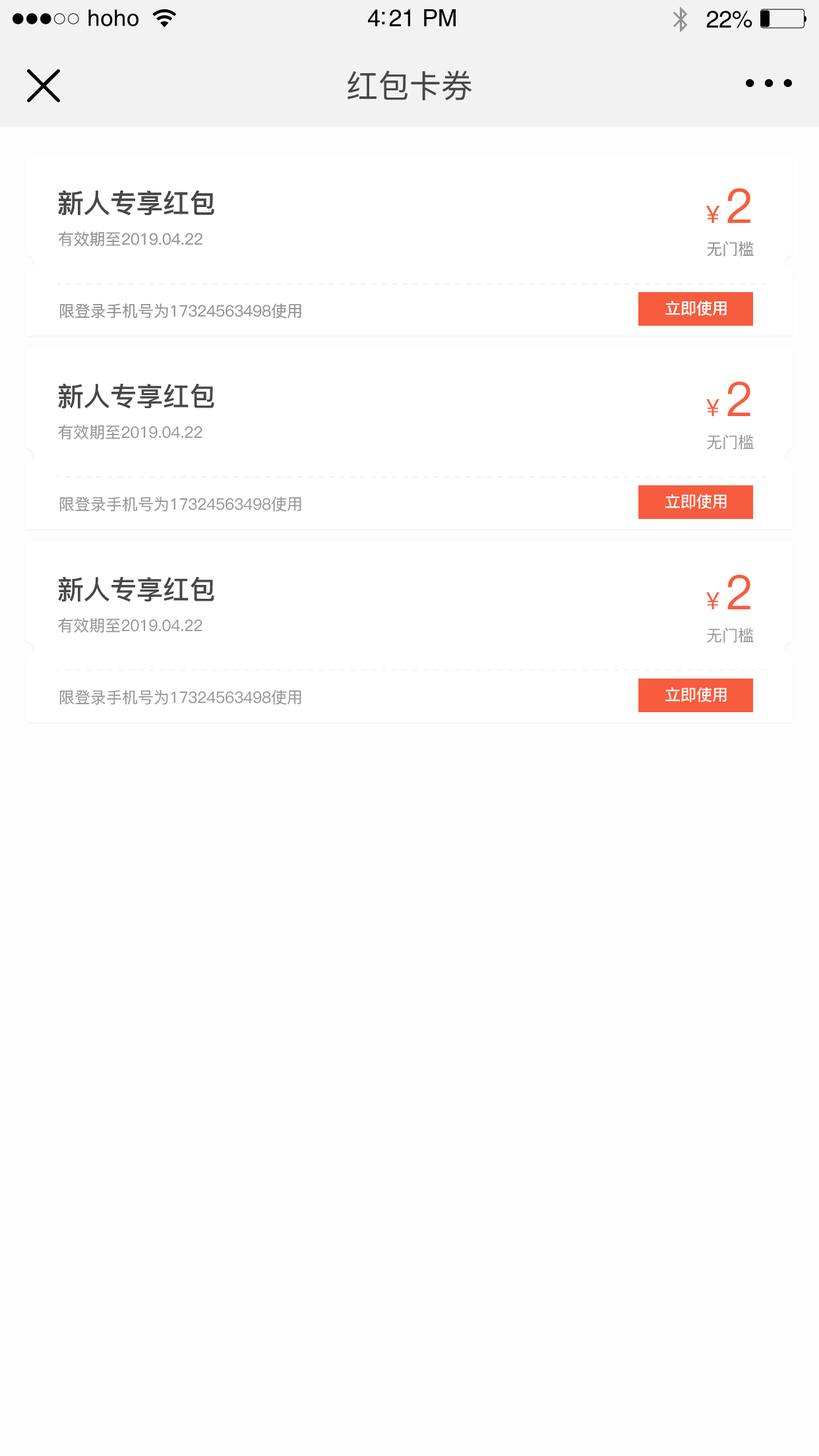
<style>
.page{position:relative;width:819px;height:1456px;background:#fefdfe}
.page>*{position:absolute;margin:0}
.t1{font:22.8px "Helvetica";letter-spacing:0.02em;color:#000000}
.t2{font:23.8px "Helvetica";letter-spacing:-0.02em;color:#000000}
.t3{font:31.7px "PingFang-SC-Medium";color:#474747}
.t4{font:26.4px "PingFang-SC-Bold";color:#474747}
.t5{font:23.7px "PingFang-SC-Medium";color:#f75c3e}
.t6{font:47.5px "PingFang-SC-Medium";color:#f75c3e}
.t7{font:15.8px "PingFang-SC-Medium";color:#959595}
.t8{font:15.8px "PingFang-SC-Bold";color:#fefdfe}
</style>
<div class="page">
<p class="t1" style="left:88px;top:9px;width:50px;height:17px">hoho</p>
<p class="t2" style="left:368px;top:9px;width:88px;height:17px">4:21 PM</p>
<p class="t2" style="left:706px;top:11px;width:46px;height:17px">22%</p>
<p class="t3" style="left:348px;top:71px;width:124px;height:29px">红包卡券</p>
<p class="t4" style="left:58px;top:190px;width:156px;height:26px">新人专享红包</p>
<p class="t5" style="left:706px;top:188px;width:44px;height:35px">￥<span class="t6">2</span></p>
<p class="t7" style="left:58px;top:231px;width:144px;height:16px">有效期至2019.04.22</p>
<p class="t7" style="left:707px;top:241px;width:47px;height:16px">无门槛</p>
<p class="t7" style="left:60px;top:303px;width:241px;height:15px">限登录手机号为17324563498使用</p>
<p class="t8" style="left:665px;top:301px;width:62px;height:15px">立即使用</p>
<p class="t4" style="left:58px;top:383px;width:156px;height:26px">新人专享红包</p>
<p class="t5" style="left:706px;top:381px;width:44px;height:35px">￥<span class="t6">2</span></p>
<p class="t7" style="left:58px;top:425px;width:144px;height:15px">有效期至2019.04.22</p>
<p class="t7" style="left:707px;top:435px;width:47px;height:15px">无门槛</p>
<p class="t7" style="left:59px;top:497px;width:242px;height:15px">限登录手机号为17324563498使用</p>
<p class="t8" style="left:665px;top:494px;width:62px;height:15px">立即使用</p>
<p class="t4" style="left:58px;top:576px;width:156px;height:26px">新人专享红包</p>
<p class="t5" style="left:706px;top:574px;width:44px;height:35px">￥<span class="t6">2</span></p>
<p class="t7" style="left:58px;top:618px;width:144px;height:15px">有效期至2019.04.22</p>
<p class="t7" style="left:707px;top:628px;width:47px;height:15px">无门槛</p>
<p class="t7" style="left:59px;top:690px;width:242px;height:15px">限登录手机号为17324563498使用</p>
<p class="t8" style="left:665px;top:687px;width:62px;height:15px">立即使用</p>
</div>
